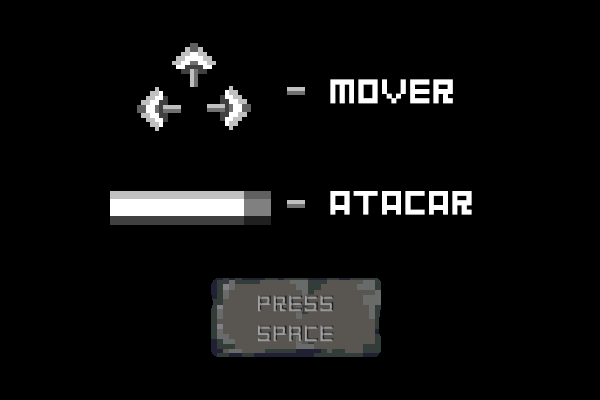
<style>
.page{position:relative;width:600px;height:400px;background:#000000}
.page>*{position:absolute;margin:0}
.t1{font:37.5px "GoodbyeDespair";color:#ffffff}
</style>
<div class="page">
<p class="t1" style="left:330px;top:79px;width:123px;height:25px">MOVER</p>
<p class="t1" style="left:330px;top:191px;width:142px;height:24px">ATACAR</p>
</div>
